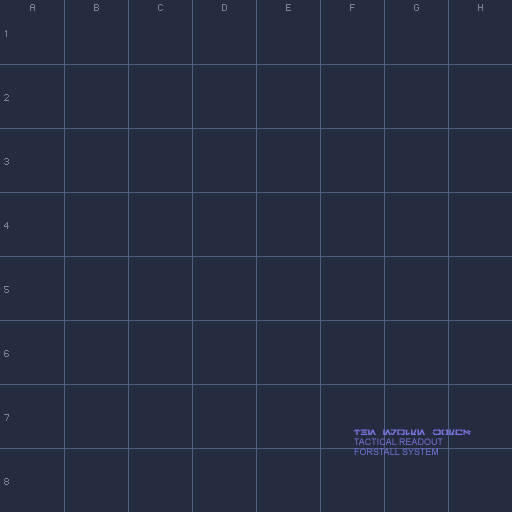
<style>
.page{position:relative;width:512px;height:512px;background:#252c3f}
.page>*{position:absolute;margin:0}
.t1{font:8px "Galactic-Basic";color:#7776df}
.t2{font:9px "ArialMT"}
</style>
<div class="page">
<p class="t1" style="left:353px;top:429px;width:118px;height:6px">the empire works</p>
<p class="t2" style="left:354px;top:438px;width:89px;height:7px">TACTICAL READOUT</p>
<p class="t2" style="left:354px;top:448px;width:84px;height:7px">FORSTALL SYSTEM</p>
</div>
